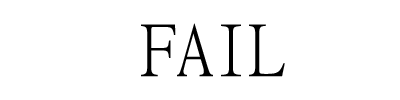
<style>
.page{position:relative;width:400px;height:100px;background:#ffffff}
.page>*{position:absolute;margin:0}
.t1{font:72px "MingLiU";color:#000000}
</style>
<div class="page">
<p class="t1" style="left:141px;top:23px;width:144px;height:54px">FAIL</p>
</div>
